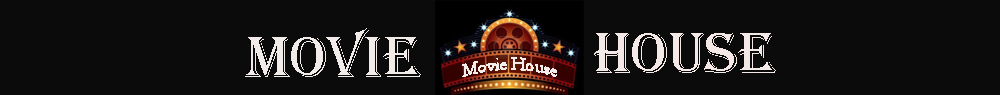
<style>
.page{position:relative;width:1000px;height:95px;background:#0b0b0b}
.page>*{position:absolute;margin:0}
.t1{font:60px "Algerian";color:#f1ebe9}
.t2{font:60px "Algerian";color:#f4e9e6}
.t3{font:18px "Garamond";color:#f3edeb}
</style>
<div class="page">
<p class="t1" style="left:245px;top:28px;width:176px;height:49px">Movie</p>
<p class="t2" style="left:594px;top:33px;width:182px;height:40px">House</p>
<p class="t3" style="left:462px;top:57px;width:95px;height:20px">Movie House</p>
</div>
